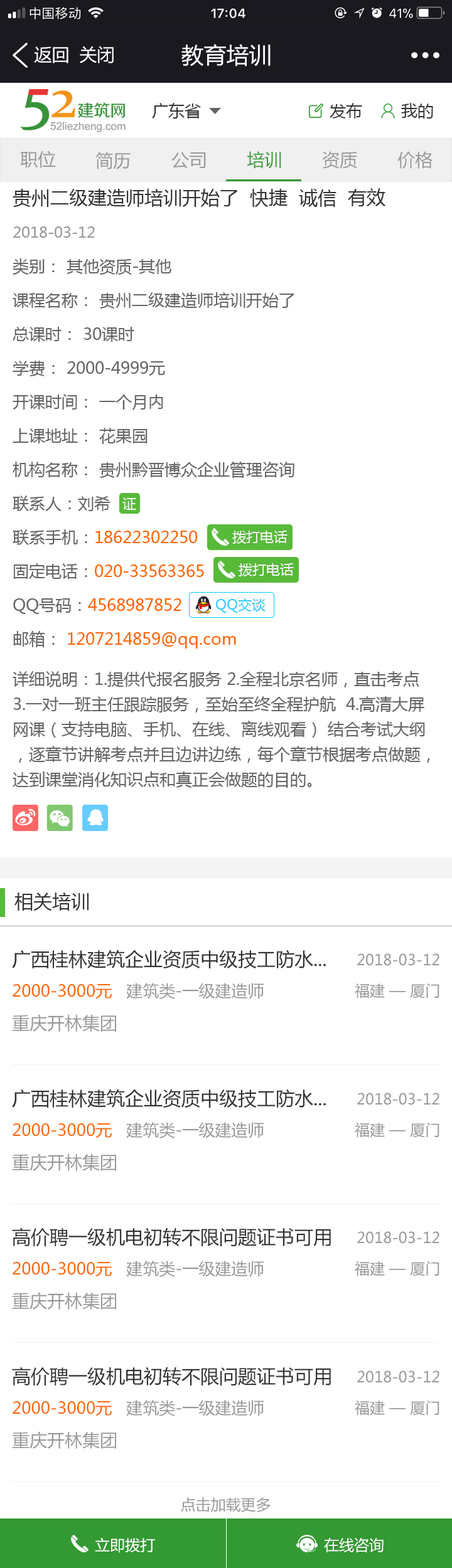
<style>
.page{position:relative;width:452px;height:1568px;background:#ffffff}
.page>*{position:absolute;margin:0}
.t1{font:17.6px "MicrosoftYaHei";color:#ffffff}
.t2{font:22.6px "MicrosoftYaHei";color:#ffffff}
.t3{font:16.3px "MicrosoftYaHei";color:#333333}
.t4{font:17.6px "MicrosoftYaHei";color:#999999}
.t5{font:17.6px "MicrosoftYaHei";color:#339933}
.t6{font:18.8px "MicrosoftYaHei";color:#333333}
.t7{font:15.1px "MicrosoftYaHei";color:#999999}
.t8{font:16.3px/33.9px "MicrosoftYaHei";color:#666666}
.t9{font:16.3px/33.9px "MicrosoftYaHei";color:#ff6600}
.t10{font:13.8px "MicrosoftYaHei";color:#f4f4f4}
.t11{font:13.8px "MicrosoftYaHei";color:#33ccff}
.t12{font:16.3px/25.1px "MicrosoftYaHei";color:#666666}
.t13{font:16.3px "MicrosoftYaHei";color:#ff6600}
.t14{font:16.3px "MicrosoftYaHei";color:#999999}
.t15{font:15.1px "MicrosoftYaHei";color:#ffffff}
</style>
<div class="page">
<p class="t1" style="left:34px;top:46px;width:34px;height:17px">返回</p>
<p class="t1" style="left:80px;top:46px;width:34px;height:17px">关闭</p>
<p class="t2" style="left:181px;top:44px;width:89px;height:22px">教育培训</p>
<p class="t3" style="left:152px;top:103px;width:49px;height:16px">广东省</p>
<p class="t3" style="left:329px;top:103px;width:33px;height:16px">发布</p>
<p class="t3" style="left:401px;top:103px;width:32px;height:16px">我的</p>
<p class="t4" style="left:20px;top:151px;width:35px;height:17px">职位</p>
<p class="t4" style="left:95px;top:152px;width:35px;height:17px">简历</p>
<p class="t4" style="left:171px;top:152px;width:35px;height:17px">公司</p>
<p class="t5" style="left:246px;top:151px;width:35px;height:18px">培训</p>
<p class="t4" style="left:322px;top:151px;width:35px;height:18px">资质</p>
<p class="t4" style="left:397px;top:151px;width:35px;height:18px">价格</p>
<p class="t6" style="left:13px;top:188px;width:372px;height:19px">贵州二级建造师培训开始了  快捷  诚信  有效</p>
<p class="t7" style="left:13px;top:226px;width:82px;height:12px">2018-03-12</p>
<p class="t8" style="left:13px;top:258px;width:281px;height:391px">类别： 其他资质-其他 <br>课程名称： 贵州二级建造师培训开始了 <br>总课时： 30课时<br>学费： 2000-4999元 <br>开课时间： 一个月内<br>上课地址： 花果园 <br>机构名称： 贵州黔晋博众企业管理咨询<br>联系人：刘希<br>联系手机：<span class="t9">18622302250<br></span>固定电话：<span class="t9">020-33563365<br></span>QQ号码：<span class="t9">4568987852<br></span>邮箱： <span class="t9">1207214859@qq.com</span></p>
<p class="t10" style="left:122px;top:497px;width:14px;height:13px">证</p>
<p class="t10" style="left:232px;top:531px;width:55px;height:13px">拨打电话</p>
<p class="t10" style="left:238px;top:563px;width:56px;height:13px">拨打电话</p>
<p class="t11" style="left:216px;top:598px;width:49px;height:15px">QQ交谈</p>
<p class="t12" style="left:13px;top:671px;width:417px;height:117px">详细说明：1.提供代报名服务 2.全程北京名师，直击考点 <br>3.一对一班主任跟踪服务，至始至终全程护航  4.高清大屏网课（支持电脑、手机、在线、离线观看） 结合考试大纲，逐章节讲解考点并且边讲边练，每个章节根据考点做题，达到课堂消化知识点和真正会做题的目的。</p>
<p class="t6" style="left:14px;top:893px;width:74px;height:18px">相关培训</p>
<p class="t6" style="left:12px;top:950px;width:314px;height:19px">广西桂林建筑企业资质中级技工防水...</p>
<p class="t7" style="left:357px;top:953px;width:82px;height:13px">2018-03-12</p>
<p class="t13" style="left:13px;top:983px;width:251px;height:16px">2000-3000元<span class="t14">   建筑类-一级建造师</span></p>
<p class="t7" style="left:354px;top:983px;width:85px;height:16px">福建 — 厦门</p>
<p class="t4" style="left:12px;top:1014px;width:104px;height:18px">重庆开林集团</p>
<p class="t6" style="left:12px;top:1089px;width:314px;height:19px">广西桂林建筑企业资质中级技工防水...</p>
<p class="t7" style="left:357px;top:1093px;width:82px;height:12px">2018-03-12</p>
<p class="t13" style="left:13px;top:1122px;width:251px;height:16px">2000-3000元<span class="t14">   建筑类-一级建造师</span></p>
<p class="t7" style="left:354px;top:1123px;width:85px;height:15px">福建 — 厦门</p>
<p class="t4" style="left:12px;top:1153px;width:104px;height:18px">重庆开林集团</p>
<p class="t6" style="left:12px;top:1227px;width:319px;height:20px">高价聘一级机电初转不限问题证书可用</p>
<p class="t7" style="left:357px;top:1231px;width:82px;height:13px">2018-03-12</p>
<p class="t13" style="left:13px;top:1261px;width:251px;height:16px">2000-3000元<span class="t14">   建筑类-一级建造师</span></p>
<p class="t7" style="left:354px;top:1261px;width:85px;height:15px">福建 — 厦门</p>
<p class="t4" style="left:12px;top:1292px;width:104px;height:18px">重庆开林集团</p>
<p class="t6" style="left:12px;top:1367px;width:319px;height:19px">高价聘一级机电初转不限问题证书可用</p>
<p class="t7" style="left:357px;top:1370px;width:82px;height:13px">2018-03-12</p>
<p class="t13" style="left:13px;top:1400px;width:251px;height:16px">2000-3000元<span class="t14">   建筑类-一级建造师</span></p>
<p class="t7" style="left:354px;top:1401px;width:85px;height:15px">福建 — 厦门</p>
<p class="t4" style="left:12px;top:1431px;width:104px;height:18px">重庆开林集团</p>
<p class="t7" style="left:181px;top:1497px;width:89px;height:15px">点击加载更多</p>
<p class="t15" style="left:95px;top:1537px;width:60px;height:16px">立即拨打</p>
<p class="t15" style="left:324px;top:1538px;width:59px;height:15px">在线咨询</p>
</div>
